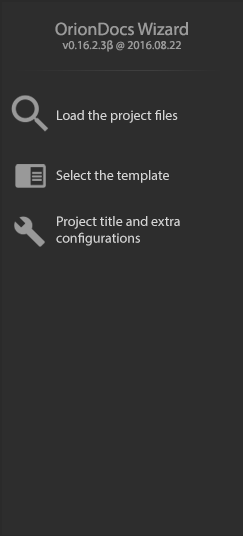
<style>
.page{position:relative;width:243px;height:536px;background:#2d2d2d}
.page>*{position:absolute;margin:0}
.t1{font:18px "MyriadPro-Regular";color:#9b9b9b}
.t2{font:12px "MyriadPro-Regular";color:#9b9b9b}
.t3{font:14px "MyriadPro-Regular";color:#d5d5d5}
</style>
<div class="page">
<p class="t1" style="left:55px;top:22px;width:133px;height:14px">OrionDocs Wizard</p>
<p class="t2" style="left:62px;top:40px;width:119px;height:12px">v0.16.2.3β @ 2016.08.22</p>
<p class="t3" style="left:57px;top:110px;width:121px;height:13px">Load the project files</p>
<p class="t3" style="left:56px;top:170px;width:113px;height:13px">Select the template</p>
<p class="t3" style="left:56px;top:216px;width:124px;height:30px">Project title and extra<br>configurations</p>
</div>
